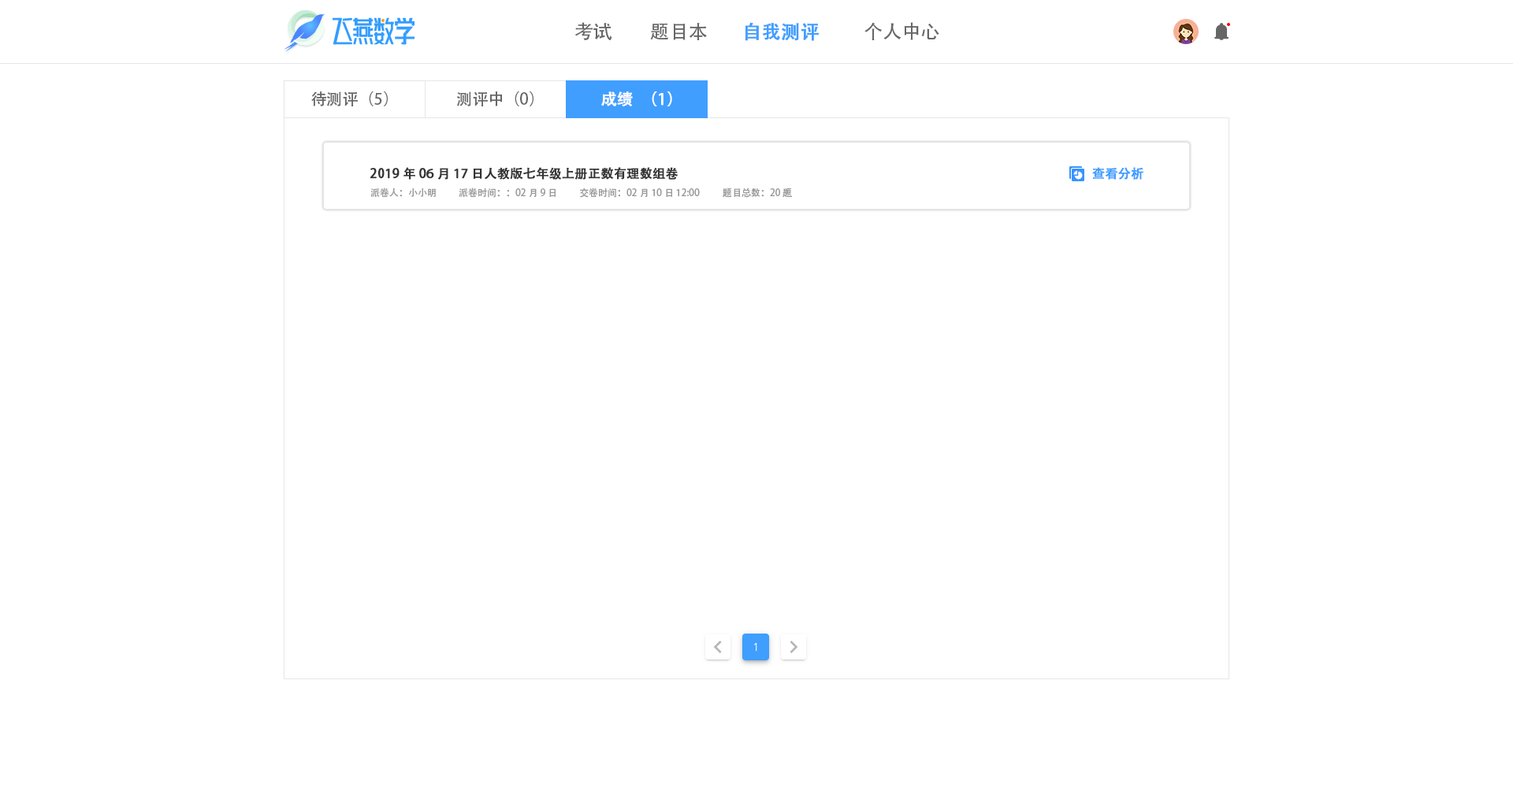
<style>
.page{position:relative;width:1513px;height:788px;background:#ffffff}
.page>*{position:absolute;margin:0}
.t1{font:18.9px "AdobeHeitiStd-Regular";color:#666666}
.t2{font:18.9px "AdobeHeitiStd-Regular";color:#409eff;font-weight:bold}
.t3{font:15.8px "AdobeHeitiStd-Regular";color:#666666}
.t4{font:15.8px "AdobeHeitiStd-Regular";color:#ffffff;font-weight:bold}
.t5{font:12.6px "AdobeHeitiStd-Regular";color:#333333;font-weight:bold}
.t6{font:12.6px "AdobeHeitiStd-Regular";color:#409eff;font-weight:bold}
.t7{font:9.5px "AdobeHeitiStd-Regular";color:#999999}
</style>
<div class="page">
<p class="t1" style="left:575px;top:22px;width:37px;height:18px">考试</p>
<p class="t1" style="left:650px;top:23px;width:57px;height:17px">题目本</p>
<p class="t2" style="left:745px;top:22px;width:74px;height:19px">自我测评</p>
<p class="t1" style="left:865px;top:22px;width:74px;height:18px">个人中心</p>
<p class="t3" style="left:311px;top:91px;width:77px;height:15px">待测评（5）</p>
<p class="t3" style="left:457px;top:91px;width:77px;height:15px">测评中（0）</p>
<p class="t4" style="left:601px;top:91px;width:71px;height:15px">成绩（1）</p>
<p class="t5" style="left:370px;top:167px;width:309px;height:13px">2019年06月17日人教版七年级上册正数有理数组卷</p>
<p class="t6" style="left:1092px;top:167px;width:51px;height:13px">查看分析</p>
<p class="t7" style="left:370px;top:188px;width:66px;height:9px">派卷人：小小明</p>
<p class="t7" style="left:459px;top:188px;width:97px;height:10px">派卷时间：：02月9日</p>
<p class="t7" style="left:580px;top:188px;width:120px;height:10px">交卷时间：02月10日 12:00</p>
<p class="t7" style="left:723px;top:188px;width:70px;height:10px">题目总数：20题</p>
</div>
